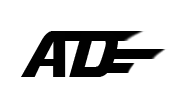
<style>
.page{position:relative;width:179px;height:110px;background:#ffffff}
.page>*{position:absolute;margin:0}
.t1{font:61.5px "Masque";color:#010101;scale:0.95 1}
</style>
<div class="page">
<p class="t1" style="left:21px;top:31px;width:97px;height:46px">AD</p>
</div>
